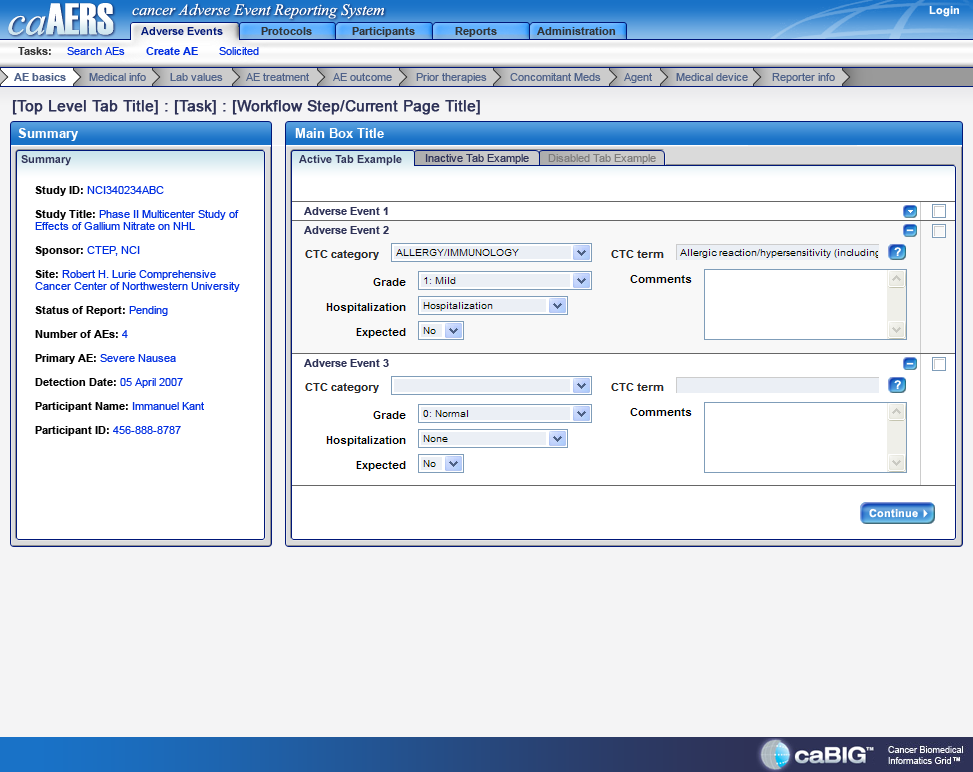
<style>
.page{position:relative;width:973px;height:772px;background:#ffffff}
.page>*{position:absolute;margin:0}
.t1{font:44px "Haettenschweiler";color:#ffffff}
.t2{font:41.1px "TimesNewRomanPS-ItalicMT";color:#ffffff}
.t3{font:16px "TimesNewRomanPS-ItalicMT";color:#ffffff}
.t4{font:11px "Arial-BoldMT";color:#ffffff}
.t5{font:11px "Arial-BoldMT";color:#001779}
.t6{font:11px "Arial-BoldMT";color:#333333}
.t7{font:11px "ArialMT";color:#002ee2}
.t8{font:11px "Arial-BoldMT";color:#002ee2}
.t9{font:11px "Arial-BoldMT";color:#4e6189}
.t10{font:11px "ArialMT";color:#4e6189}
.t11{font:15px "ArialMT";color:#2e3257;font-weight:bold}
.t12{font:13px "Arial-BoldMT";color:#ffffff}
.t13{font:11px "Arial-BoldMT";color:#2e3257}
.t14{font:11px "ArialMT";color:#2e3257}
.t15{font:11px "ArialMT";color:#7c7b7b}
.t16{font:11px/12px "ArialMT";color:#002ee2}
.t17{font:11px/12px "Arial-BoldMT";color:#000000}
</style>
<div class="page">
<p class="t1" style="left:8px;top:3px;width:106px;height:32px"><span class="t2">ca</span>AERS</p>
<p class="t3" style="left:132px;top:3px;width:252px;height:16px">cancer Adverse Event Reporting System</p>
<p class="t4" style="left:929px;top:6px;width:30px;height:11px">Login</p>
<p class="t5" style="left:141px;top:27px;width:82px;height:8px">Adverse Events</p>
<p class="t6" style="left:261px;top:27px;width:51px;height:8px">Protocols</p>
<p class="t6" style="left:352px;top:27px;width:63px;height:10px">Participants</p>
<p class="t6" style="left:455px;top:27px;width:42px;height:10px">Reports</p>
<p class="t6" style="left:537px;top:27px;width:79px;height:8px">Administration</p>
<p class="t7" style="left:18px;top:47px;width:241px;height:8px"><span class="t6">Tasks:     </span>Search AEs       <span class="t8">Create AE</span>       Solicited</p>
<p class="t9" style="left:14px;top:73px;width:52px;height:8px">AE basics</p>
<p class="t10" style="left:89px;top:73px;width:57px;height:8px">Medical info</p>
<p class="t10" style="left:170px;top:73px;width:53px;height:8px">Lab values</p>
<p class="t10" style="left:246px;top:73px;width:63px;height:8px">AE treatment</p>
<p class="t10" style="left:333px;top:73px;width:59px;height:8px">AE outcome</p>
<p class="t10" style="left:416px;top:73px;width:71px;height:10px">Prior therapies</p>
<p class="t10" style="left:510px;top:73px;width:91px;height:8px">Concomitant Meds</p>
<p class="t10" style="left:624px;top:73px;width:28px;height:10px">Agent</p>
<p class="t10" style="left:676px;top:73px;width:72px;height:8px">Medical device</p>
<p class="t10" style="left:772px;top:73px;width:63px;height:10px">Reporter info</p>
<p class="t11" style="left:12px;top:100px;width:468px;height:15px">[Top Level Tab Title] : [Task] : [Workflow Step/Current Page Title]</p>
<p class="t12" style="left:18px;top:128px;width:60px;height:13px">Summary</p>
<p class="t12" style="left:295px;top:128px;width:89px;height:10px">Main Box Title</p>
<p class="t13" style="left:21px;top:155px;width:50px;height:11px">Summary</p>
<p class="t13" style="left:299px;top:155px;width:103px;height:11px">Active Tab Example</p>
<p class="t14" style="left:425px;top:154px;width:104px;height:10px">Inactive Tab Example</p>
<p class="t15" style="left:548px;top:154px;width:108px;height:10px">Disabled Tab Example</p>
<p class="t16" style="left:35px;top:186px;width:205px;height:250px"><span class="t17">Study ID: </span>NCI340234ABC  <br><span class="t17"><br>Study Title: </span>Phase II Multicenter Study of <br>Effects of Gallium Nitrate on NHL<br><span class="t17"><br>Sponsor: </span>CTEP, NCI<br><span class="t17"><br>Site: </span>Robert H. Lurie Comprehensive <br>Cancer Center of Northwestern University<br><span class="t17"><br>Status of Report: </span>Pending<br><span class="t17"><br>Number of AEs: </span>4<br><span class="t17"><br>Primary AE: </span>Severe Nausea<br><span class="t17"><br>Detection Date: </span>05 April 2007<br><span class="t17"><br>Participant Name: </span>Immanuel Kant<br><span class="t17"><br>Participant ID: </span>456-888-8787</p>
<p class="t4" style="left:869px;top:508px;width:49px;height:10px">Continue</p>
</div>
